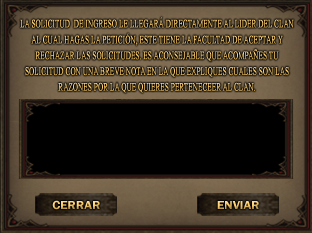
<style>
.page{position:relative;width:312px;height:233px;background:#000000}
.page>*{position:absolute;margin:0}
.t1{font:11px/15.8px "TimesNewRomanPSMT";color:#fdcc6a;text-transform:uppercase;font-weight:bold;scale:0.63 1}
.t2{font:11px/13.2px "TimesNewRomanPSMT";color:#fdcc6a;text-transform:uppercase;font-weight:bold;scale:0.63 1}
.t3{font:12px "FranklinGothic-Demi";scale:1.07 1}
</style>
<div class="page">
<p class="t1" style="left:20px;top:17px;width:274px;height:76px;text-align:center">La solicitud  de ingreso le llegará directamente al lider del clan<br>al cual hagas la petición, este tiene la facultad de aceptar y <br>rechazar las solicitudes. Es aconsejable que acompañes tu<br>solicitud con una breve nota en la que expliques cuales son las<br>razones por la que quieres perteneceer al clan<span class="t2">.</span></p>
<p class="t3" style="left:52px;top:200px;width:48px;height:10px">CERRAR</p>
<p class="t3" style="left:217px;top:201px;width:42px;height:8px">ENVIAR</p>
</div>
